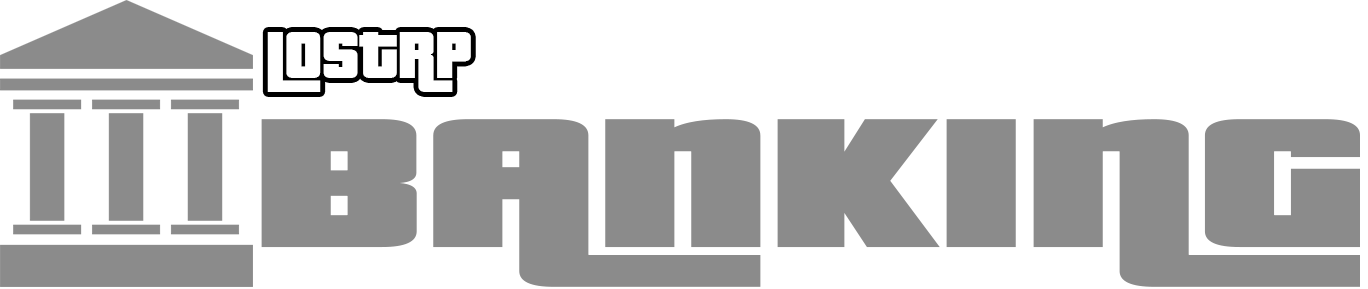
<style>
.page{position:relative;width:1368px;height:289px;background:#ffffff}
.page>*{position:absolute;margin:0}
.t1{font:72px "PricedownBl-Regular";color:#ffffff}
.t2{font:200.3px "PricedownBl-Regular";color:#8b8b8b;scale:1.66 1}
</style>
<div class="page">
<p class="t1" style="left:267px;top:32px;width:204px;height:60px">LOSTRP</p>
<p class="t2" style="left:261px;top:119px;width:1099px;height:168px">BANKING</p>
</div>
